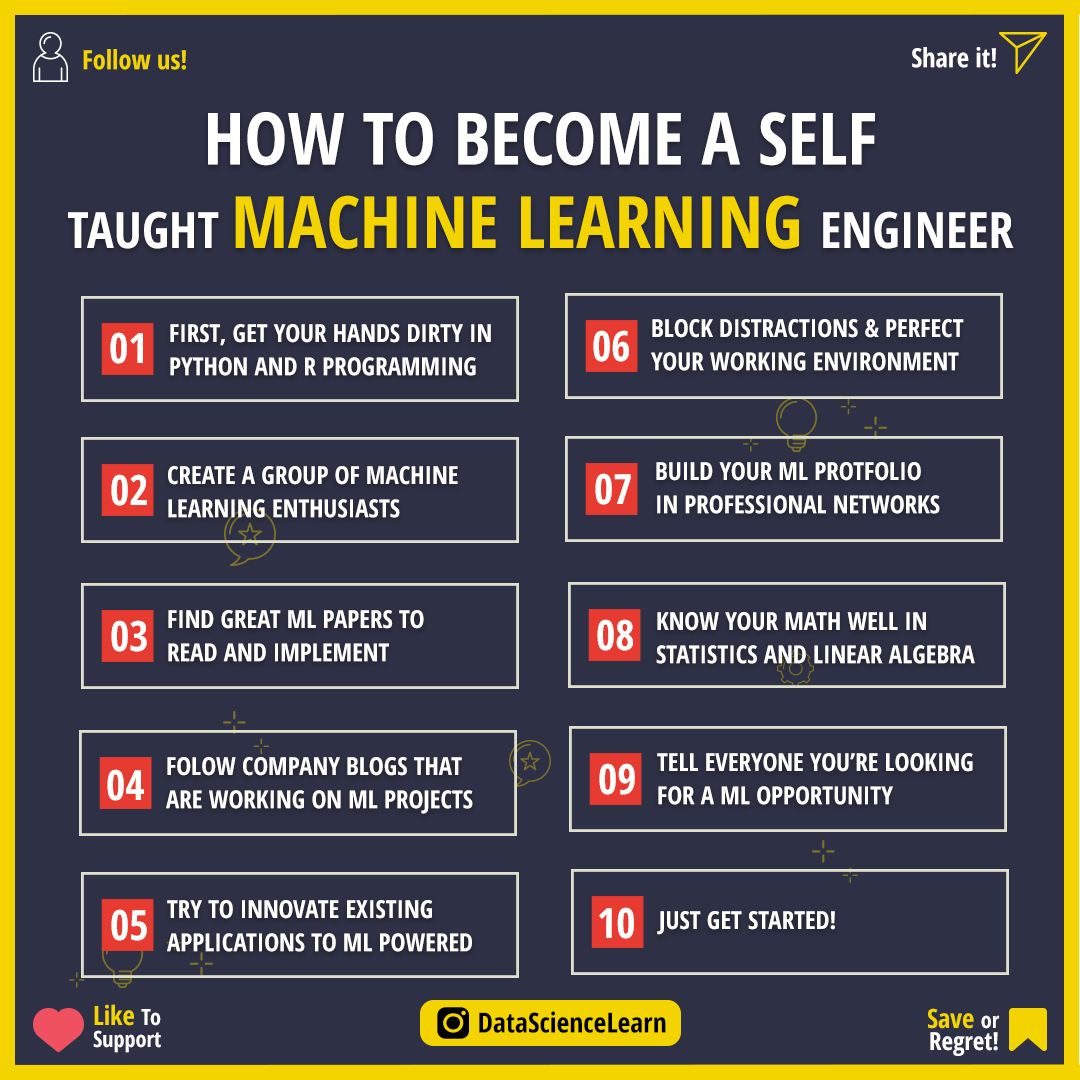
<style>
.page{position:relative;width:1080px;height:1080px;background:#2e3045}
.page>*{position:absolute;margin:0}
.t1{font:26.4px "OpenSans-CondensedBold";color:#f3d400}
.t2{font:26.4px "OpenSans-CondensedBold";color:#ffffff}
.t3{font:72.2px/72.2px "OpenSans-CondensedBold";color:#fffffe}
.t4{font:50px/83.3px "OpenSans-CondensedBold";color:#fffffe}
.t5{font:72.2px/83.3px "OpenSans-CondensedBold";color:#f3d400}
.t6{font:50px/83.3px "OpenSans-CondensedBold";color:#ffffff}
.t7{font:25px/33.3px "OpenSans-CondensedBold";color:#fffffe}
.t8{font:41.7px "OpenSans-CondensedBold";color:#fffffe}
.t9{font:25px "OpenSans-CondensedBold";color:#fffffe}
.t10{font:22.2px/22.2px "OpenSans-CondensedBold";color:#ffffff}
.t11{font:26.4px/22.2px "OpenSans-CondensedBold";color:#f3d400}
.t12{font:27.8px "OpenSans-CondensedBold";color:#000000}
.t13{font:25px/22.2px "OpenSans-CondensedBold";color:#ffffff}
</style>
<div class="page">
<p class="t1" style="left:83px;top:49px;width:103px;height:21px">Follow us!</p>
<p class="t2" style="left:912px;top:47px;width:84px;height:21px">Share it!</p>
<p class="t3" style="left:68px;top:112px;width:946px;height:137px;text-align:center">HOW TO BECOME A SELF<br><span class="t4">TAUGHT </span><span class="t5">MACHINE LEARNING </span><span class="t6">ENGINEER</span></p>
<p class="t7" style="left:170px;top:324px;width:321px;height:52px">FIRST, GET YOUR HANDS DIRTY IN<br>PYTHON AND R PROGRAMMING</p>
<p class="t7" style="left:651px;top:319px;width:313px;height:52px">BLOCK DISTRACTIONS &amp; PERFECT <br>YOUR WORKING ENVIRONMENT</p>
<p class="t8" style="left:110px;top:332px;width:33px;height:32px">01</p>
<p class="t8" style="left:593px;top:330px;width:36px;height:32px">06</p>
<p class="t7" style="left:656px;top:462px;width:284px;height:52px">BUILD YOUR ML PROTFOLIO <br>IN PROFESSIONAL NETWORKS</p>
<p class="t7" style="left:168px;top:466px;width:290px;height:52px">CREATE A GROUP OF MACHINE<br>LEARNING ENTHUSIASTS</p>
<p class="t8" style="left:595px;top:473px;width:36px;height:32px">07</p>
<p class="t8" style="left:111px;top:474px;width:36px;height:32px">02</p>
<p class="t7" style="left:168px;top:610px;width:256px;height:52px">FIND GREAT ML PAPERS TO <br>READ AND IMPLEMENT</p>
<p class="t7" style="left:656px;top:612px;width:319px;height:52px">KNOW YOUR MATH WELL IN <br>STATISTICS AND LINEAR ALGEBRA</p>
<p class="t8" style="left:111px;top:620px;width:36px;height:32px">03</p>
<p class="t8" style="left:597px;top:619px;width:36px;height:32px">08</p>
<p class="t7" style="left:166px;top:757px;width:307px;height:57px">FOLOW COMPANY BLOGS THAT<br>ARE WORKING ON ML PROJECTS</p>
<p class="t7" style="left:657px;top:753px;width:316px;height:52px">TELL EVERYONE YOU’RE LOOKING <br>FOR A ML OPPORTUNITY</p>
<p class="t8" style="left:107px;top:769px;width:37px;height:32px">04</p>
<p class="t8" style="left:599px;top:763px;width:36px;height:32px">09</p>
<p class="t7" style="left:167px;top:900px;width:305px;height:52px">TRY TO INNOVATE EXISTING <br>APPLICATIONS TO ML POWERED</p>
<p class="t8" style="left:111px;top:909px;width:36px;height:32px">05</p>
<p class="t8" style="left:599px;top:907px;width:35px;height:32px">10</p>
<p class="t9" style="left:657px;top:911px;width:178px;height:24px">JUST GET STARTED!</p>
<p class="t10" style="left:93px;top:1004px;width:68px;height:49px"><span class="t11">Like </span>To<br>Support</p>
<p class="t12" style="left:479px;top:1011px;width:187px;height:22px">DataScienceLearn</p>
<p class="t13" style="left:928px;top:1008px;width:72px;height:48px;text-align:right"><span class="t11">Save </span><span class="t10">or<br></span>Regret!</p>
</div>
